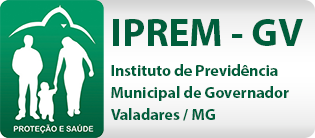
<style>
.page{position:relative;width:315px;height:138px}
.page>*{position:absolute;margin:0}
.t1{font:39.7px "MyriadPro-Bold";color:#005e3c}
.t2{font:15.9px/5.6px "MyriadPro-Bold";color:#005e3c}
</style>
<div class="page">
<p class="t1" style="left:113px;top:19px;width:190px;height:27px">IPREM - GV</p>
<p class="t2" style="left:111px;top:64px;width:178px;height:57px">Instituto de Previdência<br><br><br><br>Municipal de Governador<br><br><br><br>Valadares / MG</p>
</div>
